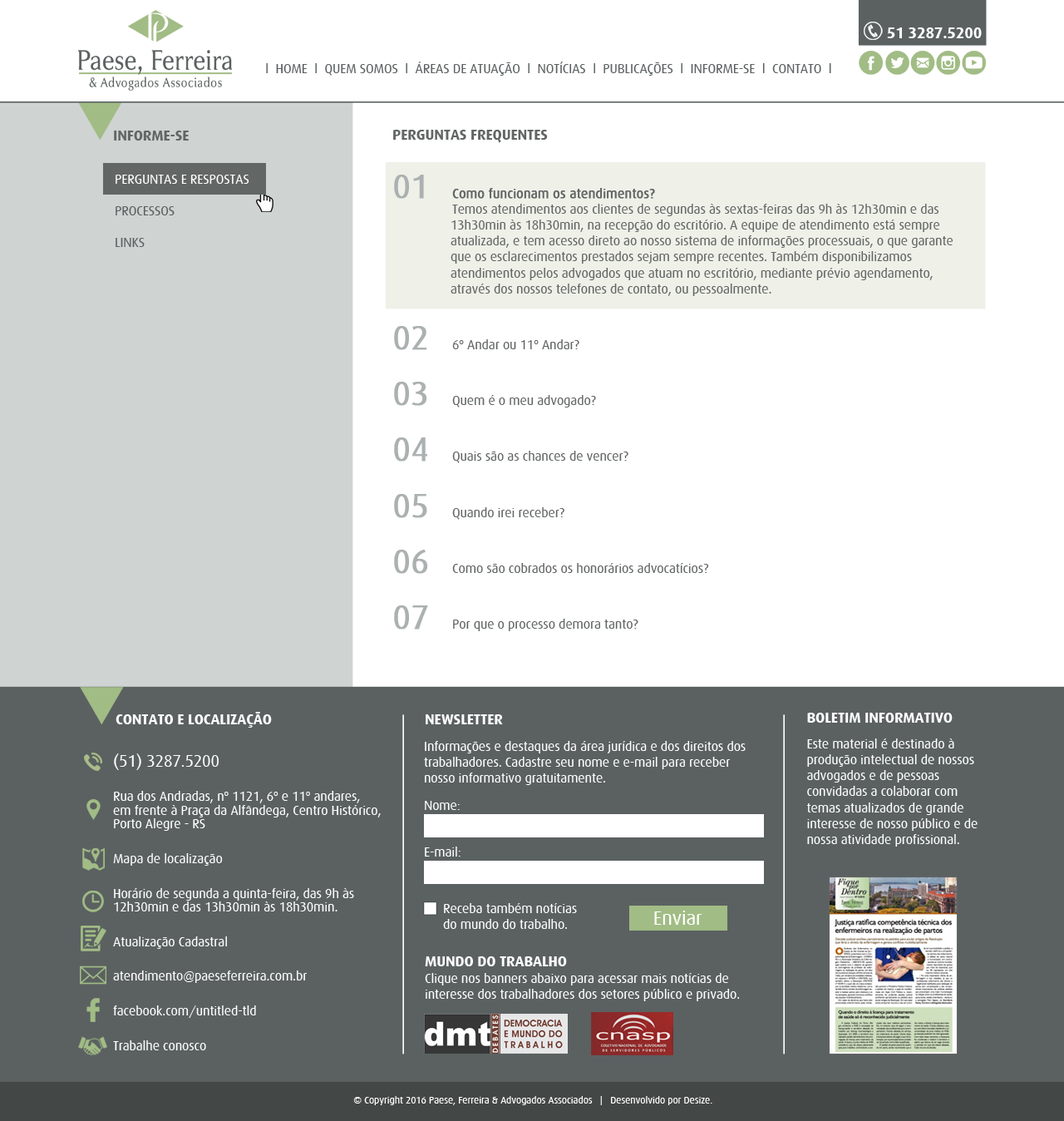
<style>
.page{position:relative;width:1064px;height:1121px;background:#ffffff}
.page>*{position:absolute;margin:0}
.t1{font:15.6px "Dax-Bold";letter-spacing:-0.01em;color:#ffffff}
.t2{font:13.3px "Dax-Regular";letter-spacing:-0.01em;color:#5b6161}
.t3{font:12.3px "ArialMT";letter-spacing:-0.01em;color:#000000}
.t4{font:15px "Dax-Bold";letter-spacing:-0.01em;color:#626665}
.t5{font:13.3px "Dax-Regular";letter-spacing:-0.01em;color:#626665}
.t6{font:33.3px "Dax-Regular";letter-spacing:-0.01em;color:#abb1b1;font-weight:bold}
.t7{font:13.3px "Dax-Regular";letter-spacing:-0.01em;color:#626665;font-weight:bold}
.t8{font:15px "Dax-Bold";letter-spacing:-0.01em;color:#ffffff}
.t9{font:13.3px "Dax-Regular";letter-spacing:-0.01em;color:#ffffff}
.t10{font:13.3px/13.8px "Dax-Regular";letter-spacing:-0.01em;color:#ffffff}
.t11{font:16.6px/13.8px "Dax-Regular";letter-spacing:-0.01em;color:#ffffff}
.t12{font:19.8px "Dax-Regular";letter-spacing:-0.01em;color:#ffffff}
.t13{font:10px "Dax-Regular";letter-spacing:-0.01em;color:#ffffff}
</style>
<div class="page">
<p class="t1" style="left:887px;top:27px;width:95px;height:11px">51 3287.5200</p>
<p class="t2" style="left:266px;top:62px;width:565px;height:14px"><span class="t3"><br></span>l  HOME  l  QUEM SOMOS  l  ÁREAS DE ATUAÇÃO  l  NOTÍCIAS  l  PUBLICAÇÕES  l  INFORME-SE  l  CONTATO  l</p>
<p class="t4" style="left:114px;top:131px;width:75px;height:9px">INFORME-SE</p>
<p class="t5" style="left:393px;top:130px;width:561px;height:501px"><span class="t4">PERGUNTAS FREQUENTES<br><br></span><span class="t6">01 </span><span class="t7">Como funcionam os atendimentos?<br></span>  Temos atendimentos aos clientes de segundas às sextas-feiras das 9h às 12h30min e das 13h30min às 18h30min, na recepção do escritório. A equipe de atendimento está sempre atualizada, e tem acesso direto ao nosso sistema de informações processuais, o que garante que os esclarecimentos prestados sejam sempre recentes. Também disponibilizamos atendimentos pelos advogados que atuam no escritório, mediante prévio agendamento, através dos nossos telefones de contato, ou pessoalmente.<br><br><span class="t6">02</span> 6º Andar ou 11º Andar?<br><br><span class="t6">03</span> Quem é o meu advogado?<br><br><span class="t6">04</span> Quais são as chances de vencer?<br><br><span class="t6">05</span> Quando irei receber?<br><br><span class="t6">06</span> Como são cobrados os honorários advocatícios?<br><br><span class="t6">07</span> Por que o processo demora tanto?</p>
<p class="t8" style="left:116px;top:712px;width:156px;height:15px">CONTATO E LOCALIZAÇÃO</p>
<p class="t9" style="left:807px;top:712px;width:171px;height:134px"><span class="t8">BOLETIM INFORMATIVO<br><br></span>Este material é destinado à produção intelectual de nossos advogados e de pessoas convidadas a colaborar com temas atualizados de grande interesse de nosso público e de nossa atividade profissional.</p>
<p class="t8" style="left:426px;top:714px;width:77px;height:10px">NEWSLETTER</p>
<p class="t9" style="left:424px;top:741px;width:322px;height:44px">Informações e destaques da área jurídica e dos direitos dos trabalhadores. Cadastre seu nome e e-mail para receber nosso informativo gratuitamente.</p>
<p class="t10" style="left:113px;top:753px;width:268px;height:297px"><span class="t11">(51) 3287.5200<br><br></span>Rua dos Andradas, nº 1121, 6º e 11º andares, <br>em frente à Praça da Alfândega, Centro Histórico, Porto Alegre - RS<br><br>Mapa de localização<br><br>Horário de segunda a quinta-feira, das 9h às 12h30min e das 13h30min às 18h30min.<br><br>Atualização Cadastral<br><br>atendimento@paeseferreira.com.br<br><br>facebook.com/untitled-tld<br><br>Trabalhe conosco</p>
<p class="t9" style="left:425px;top:801px;width:35px;height:9px">Nome:</p>
<p class="t9" style="left:425px;top:846px;width:36px;height:10px">E-mail:</p>
<p class="t9" style="left:443px;top:903px;width:134px;height:26px">Receba também notícias<br>do mundo do trabalho.</p>
<p class="t12" style="left:654px;top:910px;width:48px;height:14px">Enviar</p>
<p class="t9" style="left:425px;top:956px;width:315px;height:45px"><span class="t8">MUNDO DO TRABALHO <br></span>Clique nos banners abaixo para acessar mais notícias de <br>interesse dos trabalhadores dos setores público e privado.</p>
<p class="t13" style="left:353px;top:1096px;width:359px;height:9px">© Copyright 2016 Paese, Ferreira &amp; Advogados Associados   |   Desenvolvido por Desize.</p>
</div>
